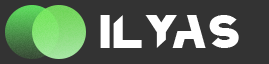
<style>
.page{position:relative;width:269px;height:64px;background:#333333}
.page>*{position:absolute;margin:0}
.t1{font:47.5px "FRIZON";color:#ffffff}
</style>
<div class="page">
<p class="t1" style="left:100px;top:15px;width:139px;height:33px">Ilyas</p>
</div>
